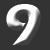
<style>
.page{position:relative;width:50px;height:50px;background:#333333}
.page>*{position:absolute;margin:0}
.t1{font:60px "ErasITC-Bold"}
</style>
<div class="page">
<p class="t1" style="left:6px;top:4px;width:35px;height:41px">9</p>
</div>
